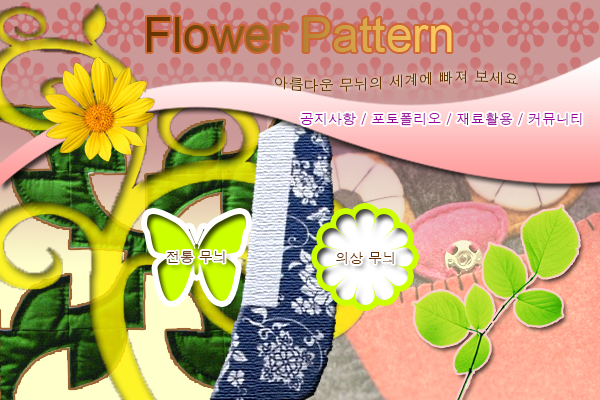
<style>
.page{position:relative;width:600px;height:400px}
.page>*{position:absolute;margin:0}
.t1{font:48.2px "ArialMT"}
.t2{font:14.9px "Dotum";color:#663300}
.t3{font:13.9px "Dotum";color:#990099}
.t4{font:13.9px "Dotum";color:#663300}
</style>
<div class="page">
<p class="t1" style="left:147px;top:17px;width:305px;height:35px">Flower Pattern</p>
<p class="t2" style="left:274px;top:70px;width:245px;height:22px">아름다운 무뉘의 세계에 빠져 보세요</p>
<p class="t3" style="left:300px;top:112px;width:282px;height:14px">공지사항 / 포토폴리오 / 재료활용 / 커뮤니티</p>
<p class="t4" style="left:166px;top:251px;width:59px;height:12px">전통 무늬</p>
<p class="t4" style="left:336px;top:252px;width:58px;height:12px">의상 무늬</p>
</div>
